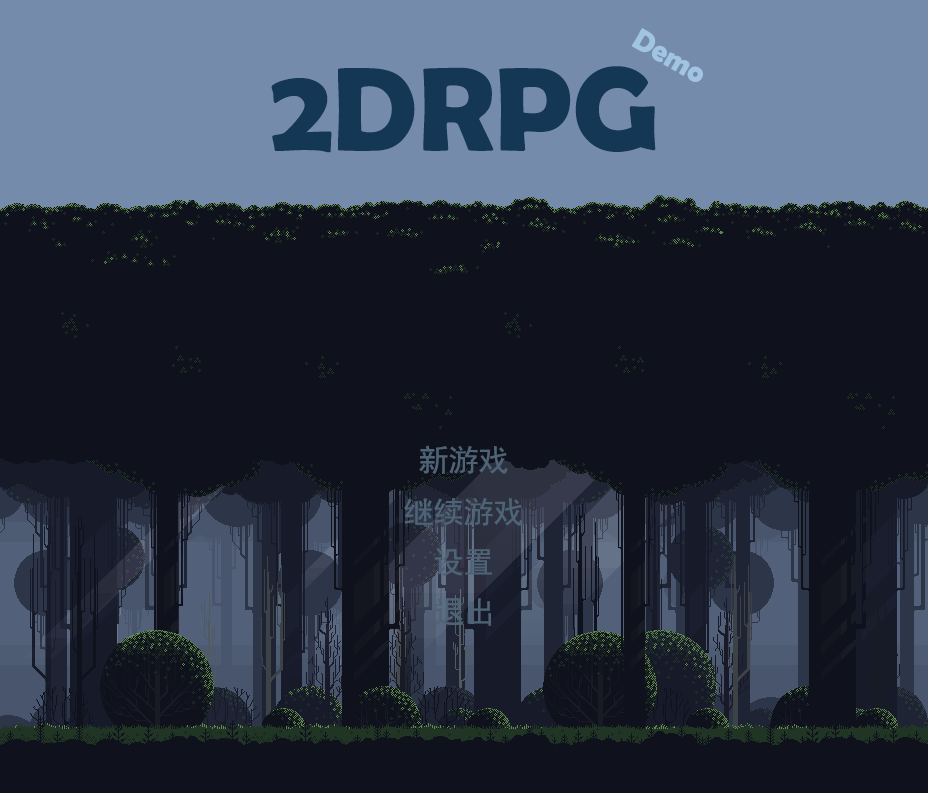
<style>
.page{position:relative;width:928px;height:793px;background:#0f111c}
.page>*{position:absolute;margin:0}
.t1{font:30px "BerlinSansFBDemi-Bold";color:#a0c4e1}
.t2{font:120px "BerlinSansFBDemi-Bold";color:#133754}
.t3{font:30px "SimHei";color:#4e6476;text-transform:uppercase}
.t4{font:30px "SimHei";color:#4e6476}
</style>
<div class="page">
<p class="t1" style="left:631px;top:28px;width:72px;height:54px;rotate:30deg">Demo</p>
<p class="t2" style="left:271px;top:66px;width:385px;height:87px">2DRPG</p>
<p class="t3" style="left:419px;top:445px;width:89px;height:29px">新游戏</p>
<p class="t4" style="left:404px;top:498px;width:119px;height:28px">继续游戏</p>
<p class="t4" style="left:434px;top:548px;width:58px;height:28px">设置</p>
<p class="t4" style="left:435px;top:598px;width:56px;height:28px">退出</p>
</div>
